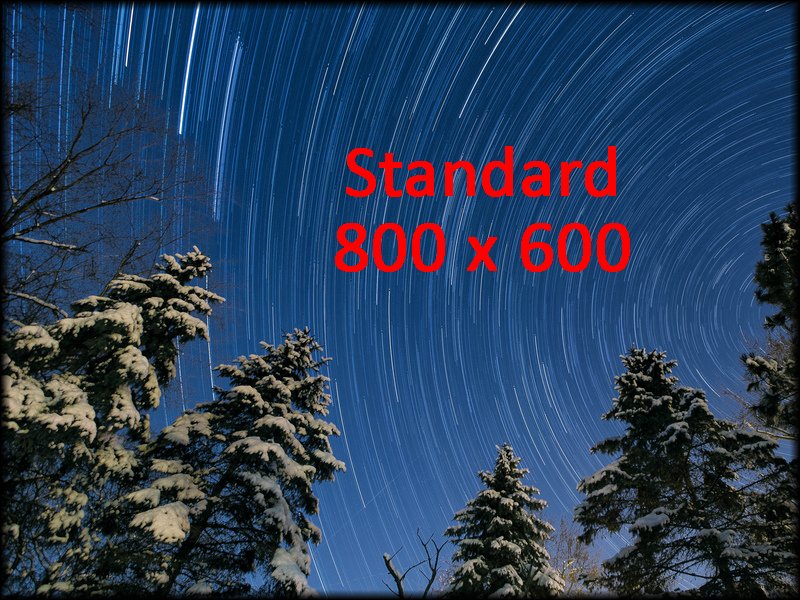
<style>
.page{position:relative;width:800px;height:600px}
.page>*{position:absolute;margin:0}
.t1{font:72px/75px "Calibri";color:#ff0000;font-weight:bold}
</style>
<div class="page">
<p class="t1" style="left:335px;top:146px;width:295px;height:126px;text-align:center">Standard<br>800 x 600</p>
</div>
